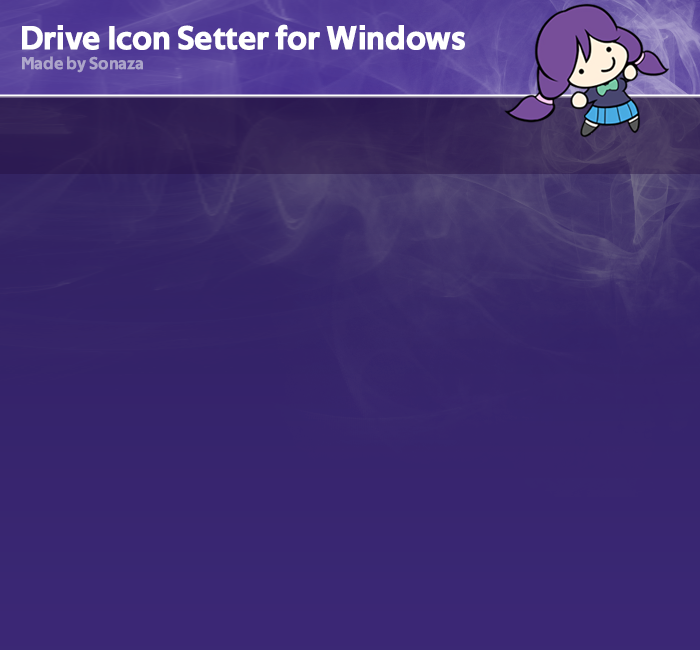
<style>
.page{position:relative;width:700px;height:650px}
.page>*{position:absolute;margin:0}
.t1{font:33.5px "TechnaSans-Regular";color:#ffffff;font-weight:bold}
.t2{font:17.4px "TechnaSans-Regular";color:#aca4c9;font-weight:bold}
</style>
<div class="page">
<p class="t1" style="left:22px;top:24px;width:443px;height:26px">Drive Icon Setter for Windows</p>
<p class="t2" style="left:22px;top:56px;width:121px;height:17px">Made by Sonaza</p>
</div>
